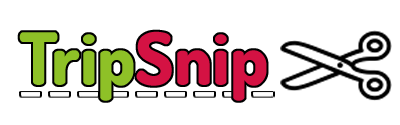
<style>
.page{position:relative;width:400px;height:125px;background:#ffffff}
.page>*{position:absolute;margin:0}
.t1{font:72px "Dosis-ExtraBold";color:#8ec127}
.t2{font:72px "Dosis-ExtraBold";color:#d41243}
</style>
<div class="page">
<p class="t1" style="left:19px;top:31px;width:248px;height:70px">Trip<span class="t2">Snip</span></p>
</div>
